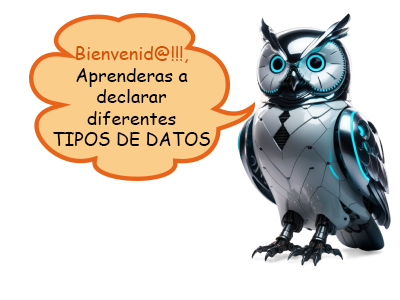
<style>
.page{position:relative;width:400px;height:300px;background:#ffffff}
.page>*{position:absolute;margin:0}
.t1{font:18px "ComicSansMS";color:#000000}
.t2{font:18px "ComicSansMS";color:#d55000}
</style>
<div class="page">
<p class="t1" style="left:53px;top:46px;width:157px;height:100px;text-align:center"><span class="t2">Bienvenid@!!!, </span>Aprenderas a declarar diferentes<br>TIPOS DE DATOS</p>
</div>
